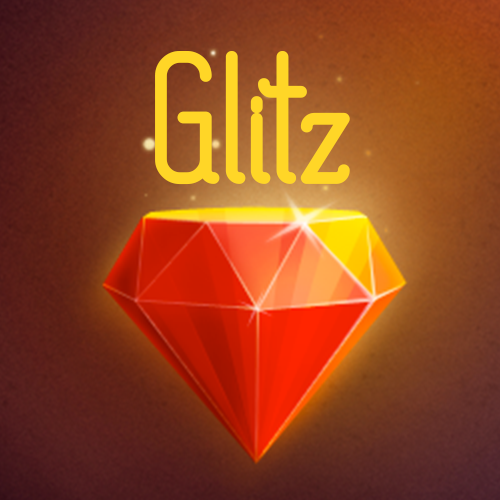
<style>
.page{position:relative;width:500px;height:500px}
.page>*{position:absolute;margin:0}
.t1{font:180px "SplendorRegular";color:#ffd627;font-weight:bold}
</style>
<div class="page">
<p class="t1" style="left:155px;top:51px;width:195px;height:134px">Glitz</p>
</div>
